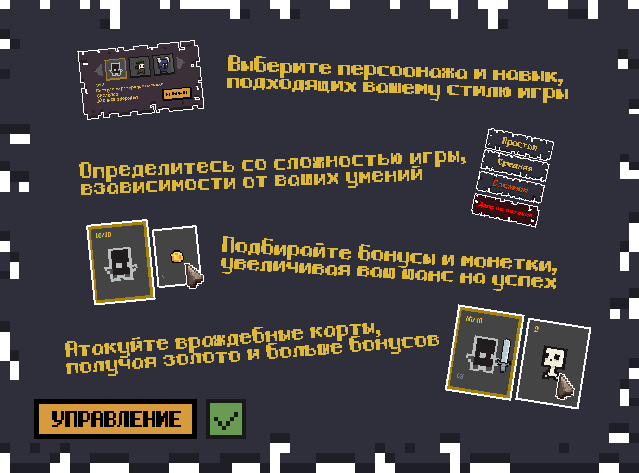
<style>
.page{position:relative;width:639px;height:473px;background:#2f2f3b}
.page>*{position:absolute;margin:0}
.t1{font:14px "Gnomoria_rus";color:#deb938;font-weight:bold}
.t2{font:14px "Gnomoria_rus";color:#000000;font-weight:bold}
</style>
<div class="page">
<p class="t1" style="left:227px;top:55px;width:341px;height:48px;rotate:2deg">Выберите персоонажа и навык,<br>подходящих вашему стилю игры</p>
<p class="t1" style="left:79px;top:151px;width:387px;height:44px;rotate:-3deg">Определитесь со сложностью игры,<br>взависимости от ваших умений</p>
<p class="t1" style="left:221px;top:236px;width:336px;height:55px;rotate:3deg">Подбирайте бонусы и монетки,<br>увеличивая ваш шанс на успех</p>
<p class="t1" style="left:65px;top:323px;width:374px;height:53px;rotate:-4deg">Атакуйте враждебные карты,<br>получая золото и больше бонусов</p>
<p class="t2" style="left:52px;top:411px;width:129px;height:16px">УПРАВЛЕНИЕ</p>
</div>
